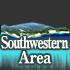
<style>
.page{position:relative;width:70px;height:70px;background:#333333}
.page>*{position:absolute;margin:0}
.t1{font:16px/15px "RyuminPro-ExBold";letter-spacing:-0.075em;color:#ffffff;scale:0.75 1}
.t2{font:16px/15px "RyuminPro-ExBold";letter-spacing:-0.04em;color:#ffffff;scale:0.9 1}
</style>
<div class="page">
<p class="t1" style="left:1px;top:36px;width:68px;height:28px;text-align:center">Southwestern<br><span class="t2">Area</span></p>
</div>
